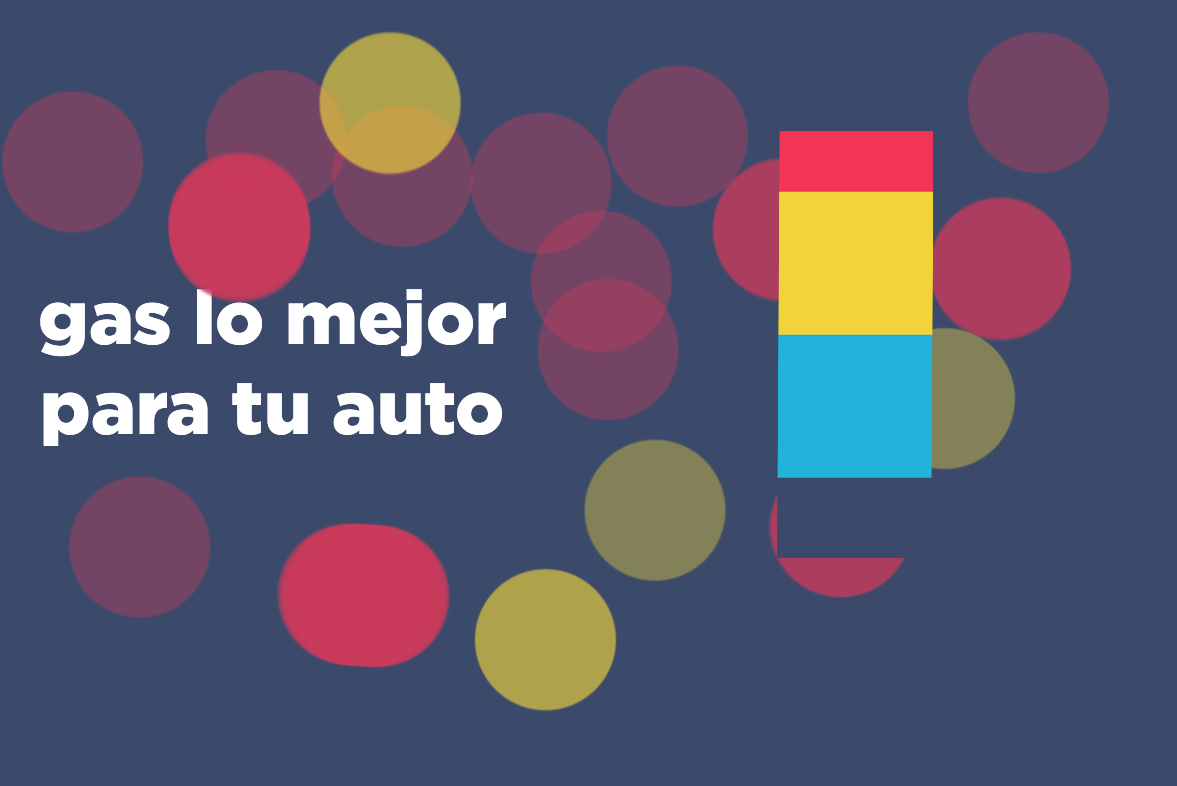
<style>
.page{position:relative;width:1177px;height:786px;background:#3b4a6b}
.page>*{position:absolute;margin:0}
.t1{font:74.9px "Gotham-Black";color:#ffffff}
</style>
<div class="page">
<p class="t1" style="left:40px;top:289px;width:466px;height:157px;text-align:center">gas lo mejor<br>para tu auto</p>
</div>
